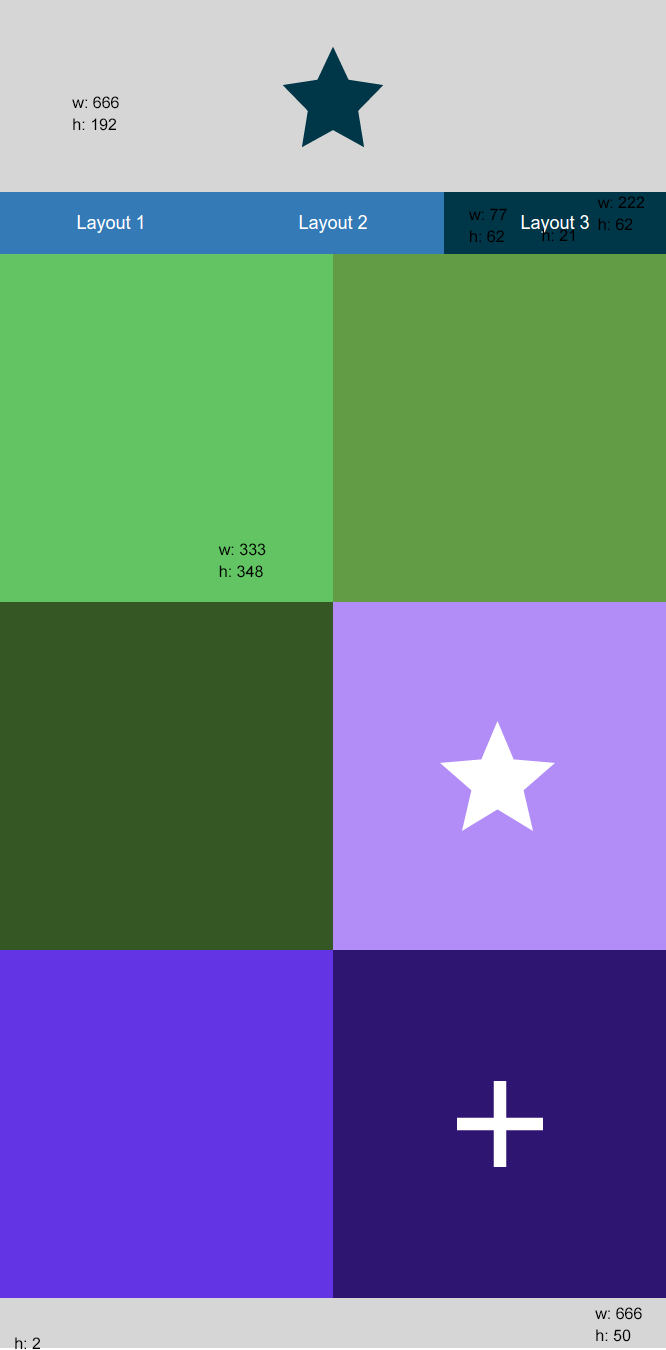
<style>
.page{position:relative;width:666px;height:1350px}
.page>*{position:absolute;margin:0}
.t1{font:16px/22px "ArialMT";color:#000000}
.t2{font:16px "ArialMT";color:#000000}
</style>
<div class="page">
<p class="t1" style="left:72px;top:96px;width:47px;height:35px">w: 666<br>h: 192</p>
<p class="t1" style="left:597px;top:196px;width:47px;height:35px">w: 222<br>h: 62</p>
<p class="t1" style="left:469px;top:208px;width:38px;height:35px">w: 77<br>h: 62</p>
<p class="t2" style="left:542px;top:229px;width:32px;height:12px">h: 21</p>
<p class="t1" style="left:218px;top:543px;width:48px;height:35px">w: 333<br>h: 348</p>
<p class="t1" style="left:595px;top:1307px;width:47px;height:35px">w: 666<br>h: 50</p>
<p class="t2" style="left:15px;top:1337px;width:25px;height:12px">h: 2</p>
</div>
